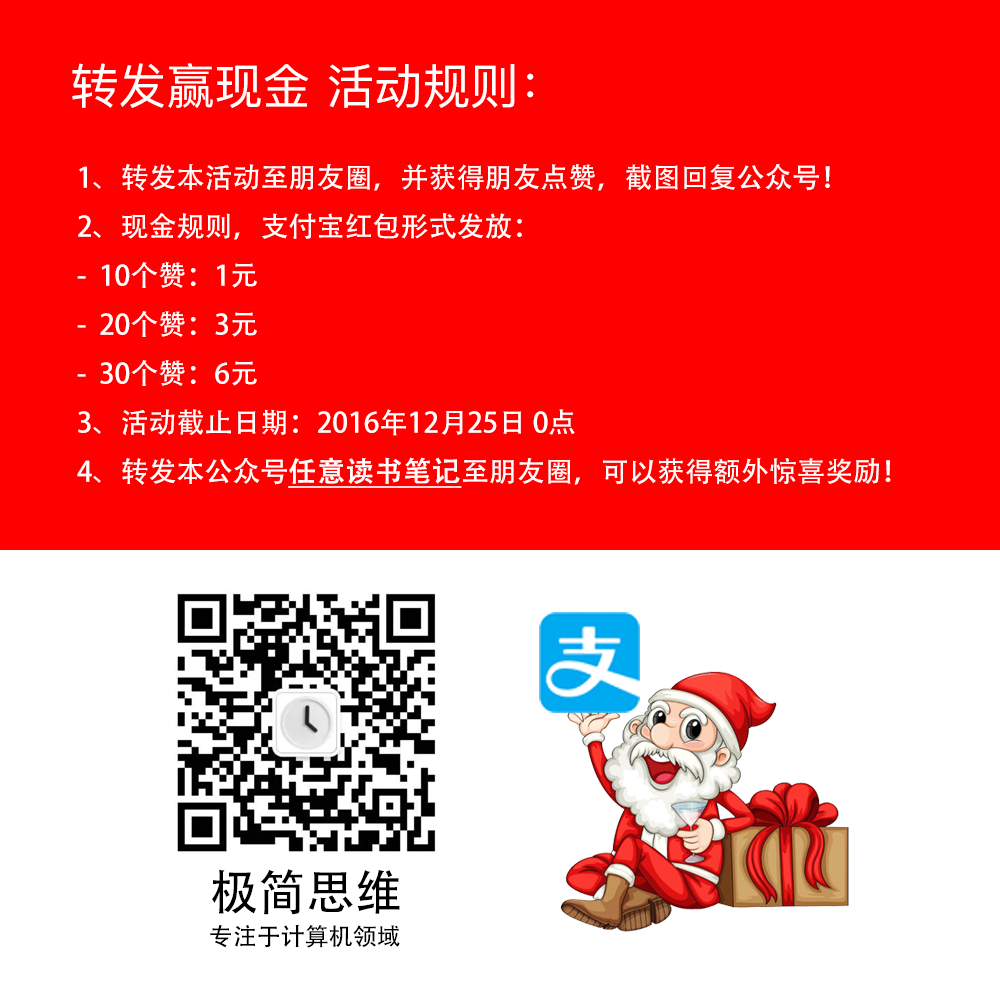
<style>
.page{position:relative;width:1000px;height:1000px;background:#ff0000}
.page>*{position:absolute;margin:0}
.t1{font:48px "PingFangSC-Regular";color:#ffffff}
.t2{font:28px "AdobeHeitiStd-Regular";color:#ffffff}
.t3{font:28px "AdobeHeitiStd-Regular";color:#ffffff;font-weight:bold;text-decoration:underline}
.t4{font:48px "AdobeHeitiStd-Regular";color:#000000}
.t5{font:24px "AdobeHeitiStd-Regular";color:#000000}
</style>
<div class="page">
<p class="t1" style="left:72px;top:63px;width:462px;height:45px">转发赢现金 活动规则：</p>
<p class="t2" style="left:77px;top:164px;width:814px;height:324px">1、转发本活动至朋友圈，并获得朋友点赞，截图回复公众号！<br>2、现金规则，支付宝红包形式发放：<br>-  10个赞：1元<br>-  20个赞：3元<br>-  30个赞：6元<br>3、活动截止日期：2016年12月25日 0点<br>4、转发本公众号<span class="t3">任意读书笔记</span>至朋友圈，可以获得额外惊喜奖励！</p>
<p class="t4" style="left:212px;top:869px;width:188px;height:46px">极简思维</p>
<p class="t5" style="left:210px;top:924px;width:190px;height:24px">专注于计算机领域</p>
</div>
